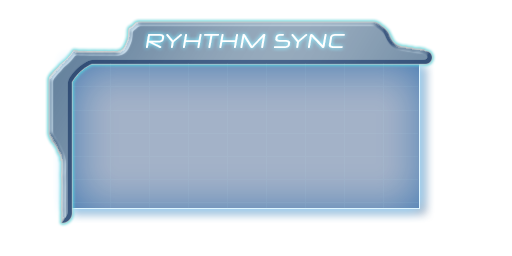
<style>
.page{position:relative;width:512px;height:256px;background:#ffffff}
.page>*{position:absolute;margin:0}
.t1{font:20px "NeuropolXFree";color:#ffffff;font-style:italic}
</style>
<div class="page">
<p class="t1" style="left:146px;top:34px;width:199px;height:14px">RYHTHM SYNC</p>
</div>
